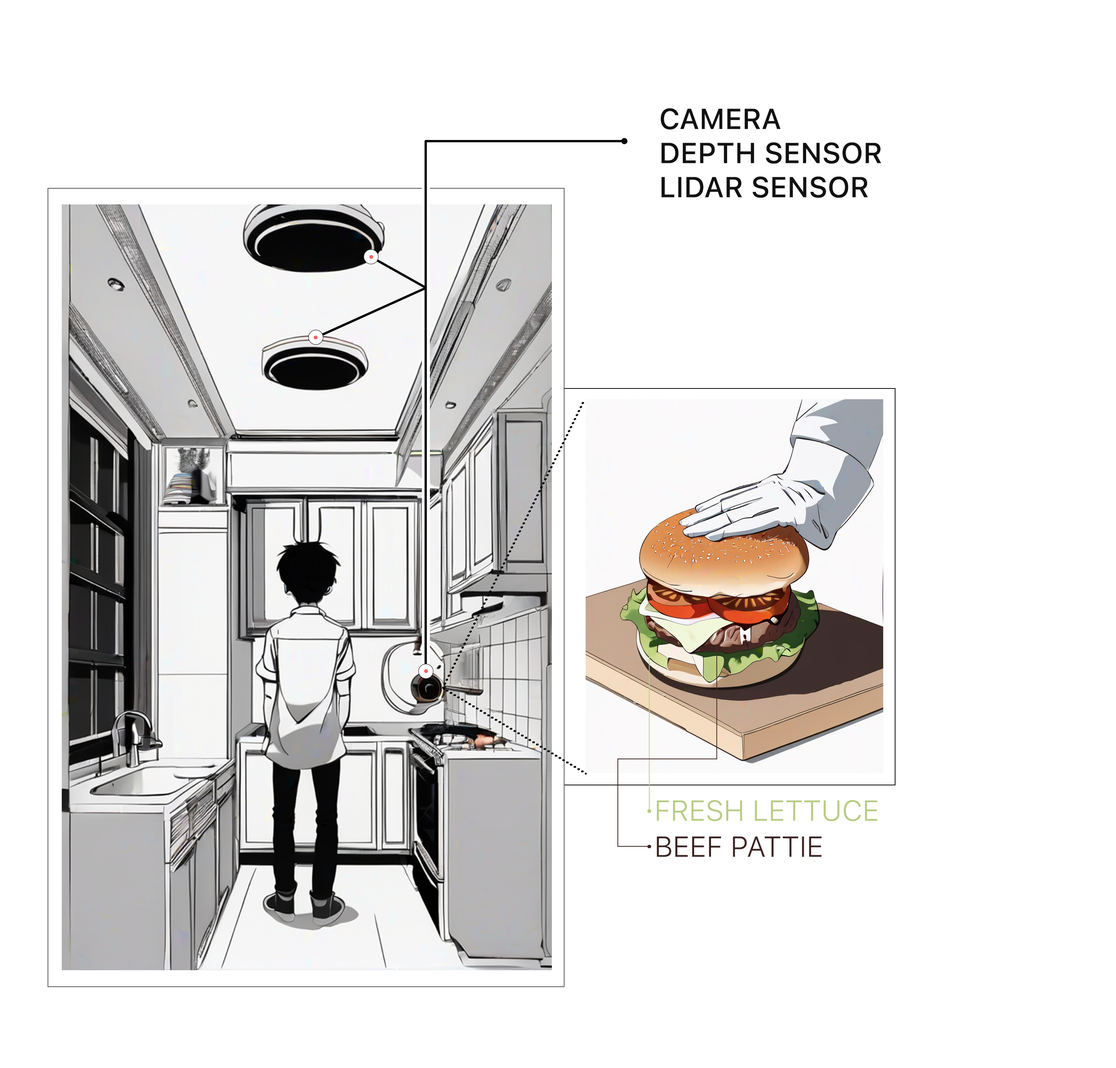
<style>
.page{position:relative;width:1116px;height:1068px;background:#ffffff}
.page>*{position:absolute;margin:0}
.t1{font:28.8px "SFProText-Medium";color:#111111;text-transform:uppercase}
.t2{font:28.8px "SFProText-Light";color:#b8cc84;text-transform:uppercase}
.t3{font:28.8px "SFProText-Light";color:#3b2320;text-transform:uppercase}
</style>
<div class="page">
<p class="t1" style="left:661px;top:108px;width:120px;height:22px">Camera</p>
<p class="t1" style="left:662px;top:142px;width:219px;height:22px">Depth sensor</p>
<p class="t1" style="left:662px;top:176px;width:206px;height:22px">Lidar sensor</p>
<p class="t2" style="left:657px;top:800px;width:221px;height:22px">Fresh Lettuce</p>
<p class="t3" style="left:657px;top:837px;width:165px;height:20px">Beef pattie</p>
</div>
